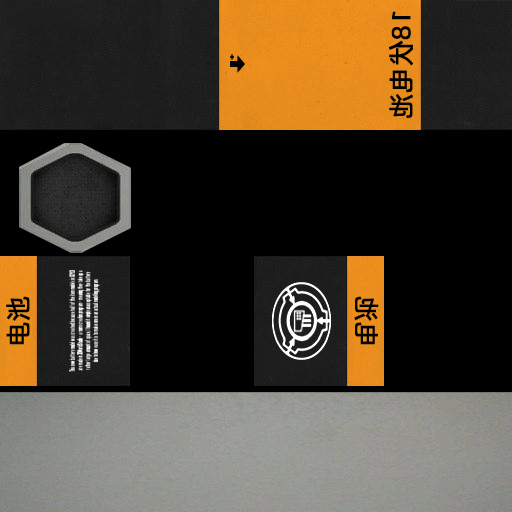
<style>
.page{position:relative;width:512px;height:512px;background:#000000}
.page>*{position:absolute;margin:0}
.t1{font:26px "AlibabaPuHuiTiR";color:#000000;font-weight:bold}
</style>
<div class="page">
<p class="t1" style="left:389px;top:11px;width:24px;height:107px;rotate:90deg">18伏电池</p>
<p class="t1" style="left:6px;top:296px;width:24px;height:49px;rotate:-90deg">电池</p>
<p class="t1" style="left:354px;top:296px;width:25px;height:49px;rotate:-90deg">电池</p>
</div>
